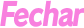
<style>
.page{position:relative;width:84px;height:28px;background:#ffffff}
.page>*{position:absolute;margin:0}
.t1{font:32px "RodinPro-EB";letter-spacing:-0.054em;color:#f880de;font-style:italic;scale:0.81 1}
</style>
<div class="page">
<p class="t1" style="left:0px;top:0px;width:85px;height:27px">Fechar</p>
</div>
